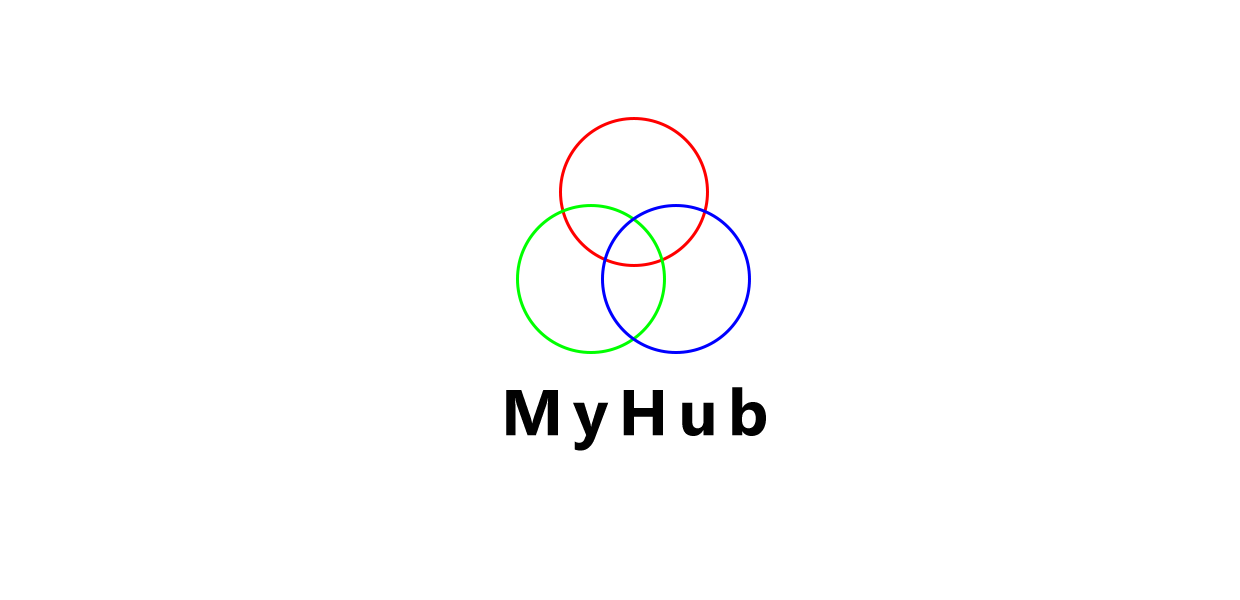
<style>
.page{position:relative;width:1240px;height:600px;background:#ffffff}
.page>*{position:absolute;margin:0}
.t1{font:111.1px "SegoeUI-Bold";letter-spacing:0.16em;color:#010101}
</style>
<div class="page">
<p class="t1" style="left:506px;top:387px;width:260px;height:64px">MyHub</p>
</div>
